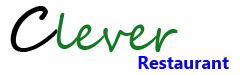
<style>
.page{position:relative;width:240px;height:75px;background:#ffffff}
.page>*{position:absolute;margin:0}
.t1{font:48px "SegoeScript";color:#107921}
.t2{font:60px "SegoeScript";color:#000000}
.t3{font:18px "MyanmarText-Bold";color:#0d07e7}
</style>
<div class="page">
<p class="t1" style="left:10px;top:6px;width:168px;height:46px"><span class="t2">C</span>lever</p>
<p class="t3" style="left:138px;top:56px;width:91px;height:13px">Restaurant</p>
</div>
